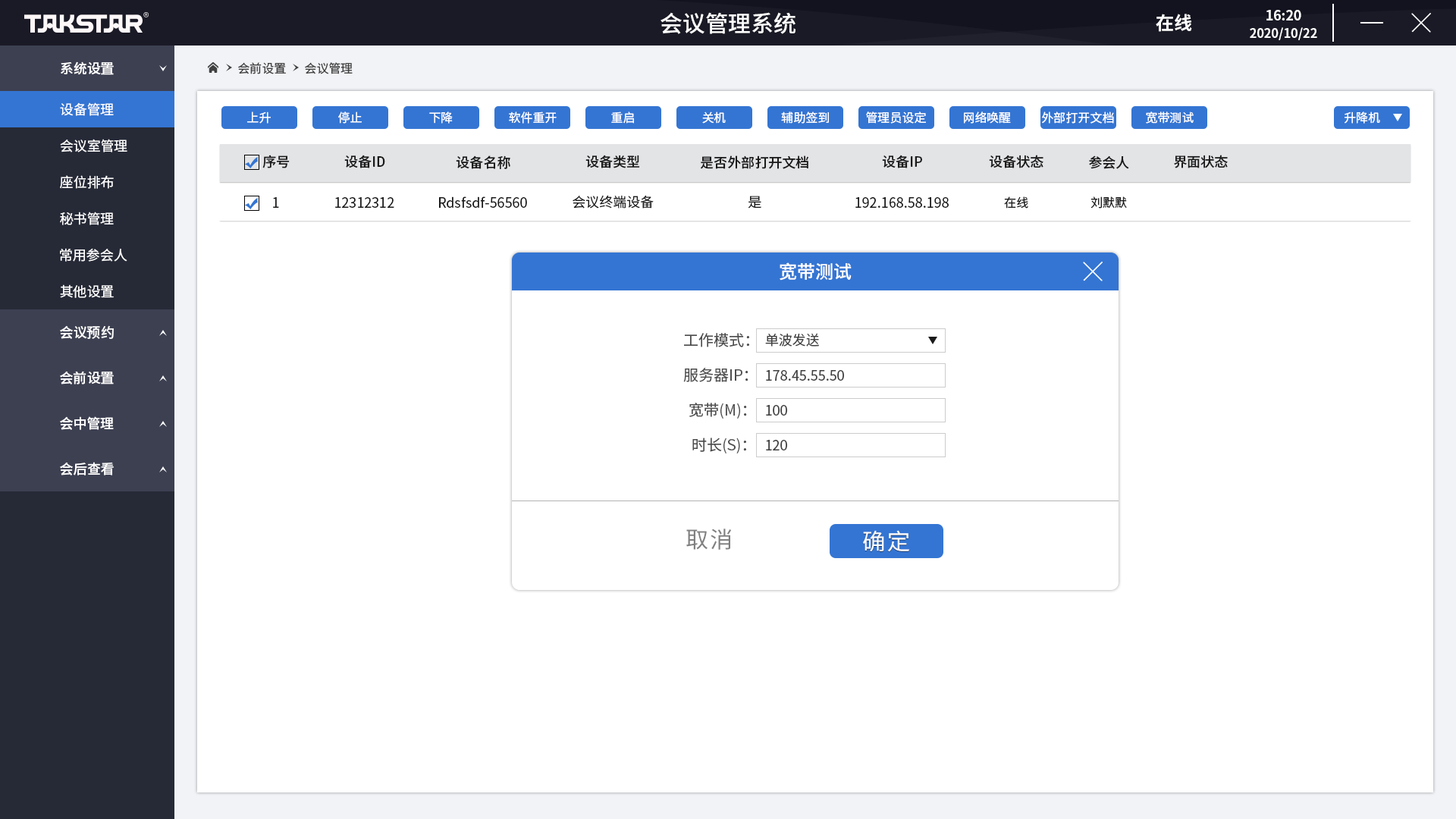
<style>
.page{position:relative;width:1456px;height:819px;background:#ffffff}
.page>*{position:absolute;margin:0}
.t1{font:22.7px "SourceHanSansCN-Medium";color:#ffffff}
.t2{font:18.2px "SourceHanSansCN-Bold";color:#ffffff}
.t3{font:12.6px/17.2px "SourceHanSansCN-Bold";letter-spacing:-0.01em;color:#fefefe}
.t4{font:13.8px/17.2px "SourceHanSansCN-Bold";letter-spacing:-0.01em;color:#fefefe}
.t5{font:13.6px "SourceHanSansCN-Medium";color:#ffffff}
.t6{font:12.1px "SourceHanSansCN-Regular";color:#404040}
.t7{font:13.6px "SourceHanSansCN-Regular";color:#ffffff}
.t8{font:12.1px "SourceHanSansCN-Regular";color:#ffffff}
.t9{font:13.6px "SourceHanSansCN-Medium";color:#1a1a1a}
.t10{font:13.6px "SourceHanSansCN-Regular";color:#1a1a1a}
.t11{font:12.1px "SourceHanSansCN-Regular";color:#1a1a1a}
.t12{font:18.2px "SourceHanSansCN-Medium";color:#ffffff}
.t13{font:15.2px "SourceHanSansCN-Regular";color:#4d4d4d}
.t14{font:13.6px "SourceHanSansCN-Regular";color:#404040}
.t15{font:22.7px "SourceHanSansCN-Regular";letter-spacing:0.075em;color:#808080}
.t16{font:22.7px "SourceHanSansCN-Regular";letter-spacing:0.075em;color:#ffffff}
</style>
<div class="page">
<p class="t1" style="left:660px;top:12px;width:135px;height:22px">会议管理系统</p>
<p class="t2" style="left:1156px;top:14px;width:36px;height:18px">在线</p>
<p class="t3" style="left:1250px;top:10px;width:67px;height:30px;text-align:center"><span class="t4">16:20<br></span>2020/10/22</p>
<p class="t5" style="left:61px;top:61px;width:53px;height:14px">系统设置</p>
<p class="t6" style="left:238px;top:62px;width:48px;height:12px">会前设置</p>
<p class="t6" style="left:305px;top:62px;width:48px;height:12px">会议管理</p>
<p class="t7" style="left:60px;top:102px;width:54px;height:14px">设备管理</p>
<p class="t8" style="left:247px;top:111px;width:24px;height:13px">上升</p>
<p class="t8" style="left:338px;top:111px;width:24px;height:13px">停止</p>
<p class="t8" style="left:429px;top:111px;width:24px;height:13px">下降</p>
<p class="t8" style="left:509px;top:111px;width:48px;height:13px">软件重开</p>
<p class="t8" style="left:611px;top:111px;width:23px;height:13px">重启</p>
<p class="t8" style="left:702px;top:111px;width:24px;height:13px">关机</p>
<p class="t8" style="left:781px;top:111px;width:48px;height:13px">辅助签到</p>
<p class="t8" style="left:866px;top:111px;width:60px;height:13px">管理员设定</p>
<p class="t8" style="left:964px;top:111px;width:47px;height:13px">网络唤醒</p>
<p class="t8" style="left:1042px;top:111px;width:72px;height:13px">外部打开文档</p>
<p class="t8" style="left:1146px;top:111px;width:48px;height:13px">宽带测试</p>
<p class="t8" style="left:1345px;top:111px;width:35px;height:13px">升降机</p>
<p class="t7" style="left:60px;top:139px;width:67px;height:13px">会议室管理</p>
<p class="t9" style="left:262px;top:155px;width:28px;height:13px">序号</p>
<p class="t9" style="left:344px;top:155px;width:41px;height:13px">设备ID</p>
<p class="t9" style="left:456px;top:155px;width:54px;height:14px">设备名称</p>
<p class="t9" style="left:585px;top:155px;width:55px;height:13px">设备类型</p>
<p class="t9" style="left:700px;top:155px;width:108px;height:14px">是否外部打开文档</p>
<p class="t9" style="left:882px;top:155px;width:40px;height:13px">设备IP</p>
<p class="t9" style="left:989px;top:155px;width:54px;height:13px">设备状态</p>
<p class="t9" style="left:1089px;top:155px;width:40px;height:14px">参会人</p>
<p class="t9" style="left:1174px;top:155px;width:54px;height:13px">界面状态</p>
<p class="t7" style="left:60px;top:175px;width:54px;height:14px">座位排布</p>
<p class="t10" style="left:273px;top:197px;width:6px;height:11px">1</p>
<p class="t10" style="left:335px;top:197px;width:59px;height:11px">12312312</p>
<p class="t10" style="left:439px;top:196px;width:88px;height:12px">Rdsfsdf-56560</p>
<p class="t10" style="left:573px;top:195px;width:81px;height:14px">会议终端设备</p>
<p class="t10" style="left:748px;top:196px;width:13px;height:13px">是</p>
<p class="t10" style="left:855px;top:197px;width:94px;height:11px">192.168.58.198</p>
<p class="t11" style="left:1004px;top:196px;width:24px;height:13px">在线</p>
<p class="t11" style="left:1090px;top:196px;width:37px;height:13px">刘默默</p>
<p class="t7" style="left:60px;top:212px;width:54px;height:13px">秘书管理</p>
<p class="t7" style="left:60px;top:248px;width:67px;height:14px">常用参会人</p>
<p class="t12" style="left:780px;top:262px;width:72px;height:19px">宽带测试</p>
<p class="t7" style="left:60px;top:284px;width:54px;height:14px">其他设置</p>
<p class="t5" style="left:60px;top:325px;width:54px;height:14px">会议预约</p>
<p class="t13" style="left:684px;top:333px;width:65px;height:14px">工作模式：</p>
<p class="t14" style="left:765px;top:333px;width:54px;height:14px">单波发送</p>
<p class="t5" style="left:60px;top:371px;width:54px;height:13px">会前设置</p>
<p class="t13" style="left:683px;top:368px;width:65px;height:14px">服务器IP：</p>
<p class="t14" style="left:766px;top:370px;width:78px;height:11px">178.45.55.50</p>
<p class="t13" style="left:689px;top:403px;width:58px;height:16px">宽带(M)：</p>
<p class="t14" style="left:766px;top:405px;width:21px;height:11px">100</p>
<p class="t5" style="left:60px;top:416px;width:54px;height:14px">会中管理</p>
<p class="t13" style="left:692px;top:438px;width:54px;height:15px">时长(S)：</p>
<p class="t14" style="left:766px;top:440px;width:21px;height:10px">120</p>
<p class="t5" style="left:60px;top:462px;width:54px;height:13px">会后查看</p>
<p class="t15" style="left:686px;top:529px;width:46px;height:21px">取消</p>
<p class="t16" style="left:863px;top:530px;width:46px;height:22px">确定</p>
</div>
